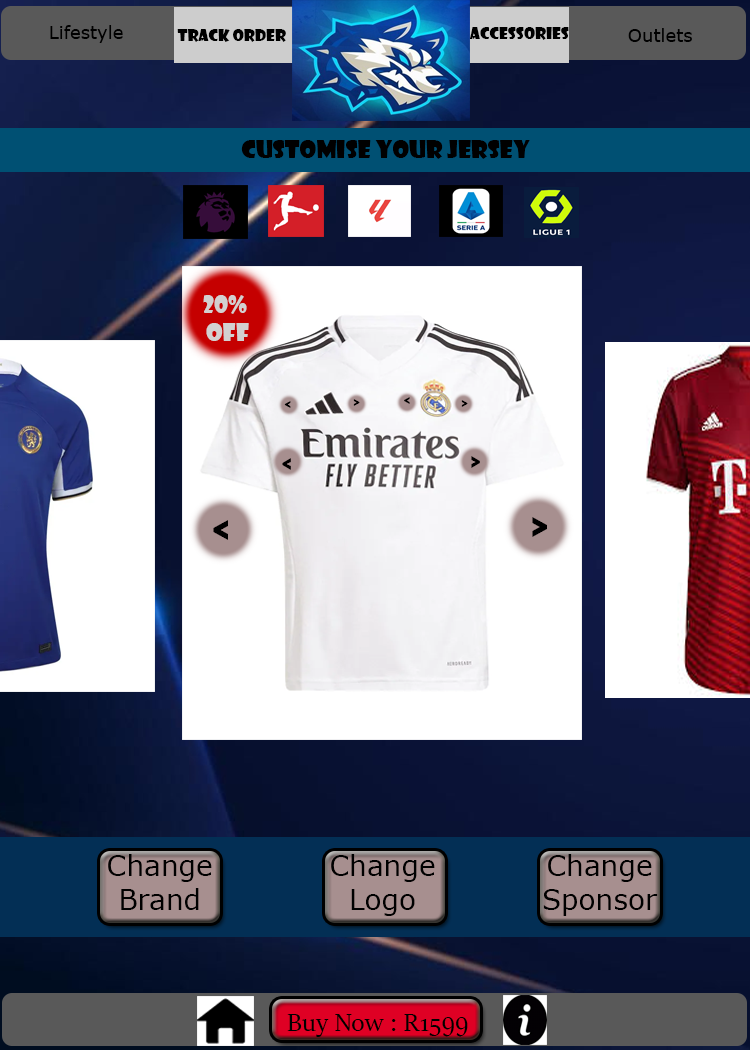
<style>
.page{position:relative;width:750px;height:1050px}
.page>*{position:absolute;margin:0}
.t1{font:18px "Verdana";color:#000000}
.t2{font:16px "ShowcardGothic-Reg";color:#000000}
.t3{font:24px "ShowcardGothic-Reg";color:#000000}
.t4{font:24px "ShowcardGothic-Reg";color:#d3d0d0}
.t5{font:18px "ShowcardGothic-Reg";color:#000000}
.t6{font:28px "ShowcardGothic-Reg";color:#000000}
.t7{font:48px "ShowcardGothic-Reg";color:#010101}
.t8{font:48px "ShowcardGothic-Reg";color:#000000}
.t9{font:28px "Verdana";color:#000000}
.t10{font:28px "SitkaBanner";color:#000000}
</style>
<div class="page">
<p class="t1" style="left:50px;top:25px;width:73px;height:18px">Lifestyle</p>
<p class="t2" style="left:177px;top:29px;width:109px;height:13px">Track Order</p>
<p class="t2" style="left:469px;top:27px;width:100px;height:13px">Accessories</p>
<p class="t1" style="left:628px;top:28px;width:64px;height:14px">Outlets</p>
<p class="t3" style="left:241px;top:140px;width:289px;height:19px">Customise your jersey</p>
<p class="t4" style="left:203px;top:295px;width:46px;height:46px;text-align:center">20% <br>off</p>
<p class="t5" style="left:284px;top:401px;width:7px;height:7px">&lt;</p>
<p class="t5" style="left:353px;top:399px;width:7px;height:7px">&gt;</p>
<p class="t5" style="left:404px;top:397px;width:6px;height:7px">&lt;</p>
<p class="t5" style="left:461px;top:400px;width:7px;height:7px">&gt;</p>
<p class="t6" style="left:282px;top:458px;width:9px;height:12px">&lt;</p>
<p class="t6" style="left:471px;top:456px;width:9px;height:12px">&gt;</p>
<p class="t7" style="left:213px;top:520px;width:15px;height:20px">&lt;</p>
<p class="t8" style="left:532px;top:517px;width:15px;height:20px">&gt;</p>
<p class="t9" style="left:108px;top:854px;width:104px;height:56px;text-align:center">Change<br>Brand</p>
<p class="t9" style="left:331px;top:854px;width:104px;height:62px;text-align:center">Change Logo</p>
<p class="t9" style="left:543px;top:854px;width:115px;height:62px;text-align:center">Change<br>Sponsor</p>
<p class="t10" style="left:287px;top:1014px;width:181px;height:23px">Buy Now : R1599</p>
</div>
